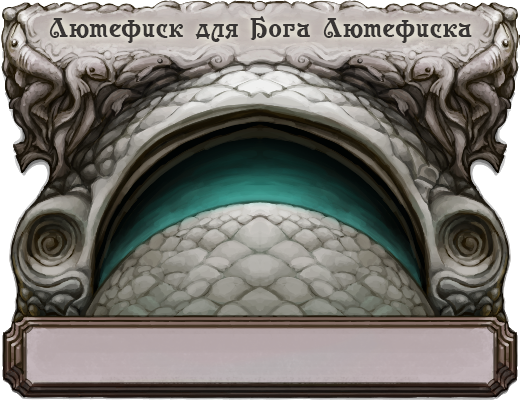
<style>
.page{position:relative;width:520px;height:400px}
.page>*{position:absolute;margin:0}
.t1{font:27.7px "Casanova";letter-spacing:0.03em;color:#373433}
</style>
<div class="page">
<p class="t1" style="left:49px;top:16px;width:423px;height:27px">Лютефиск для Бога Лютефиска</p>
</div>
